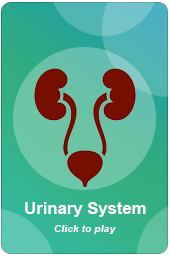
<style>
.page{position:relative;width:170px;height:256px}
.page>*{position:absolute;margin:0}
.t1{font:16.7px "Arial-BoldMT";color:#ffffff}
.t2{font:10.4px "Arial-BoldItalicMT";color:#ffffff}
</style>
<div class="page">
<p class="t1" style="left:25px;top:202px;width:121px;height:15px">Urinary System</p>
<p class="t2" style="left:54px;top:225px;width:62px;height:9px">Click to play</p>
</div>
